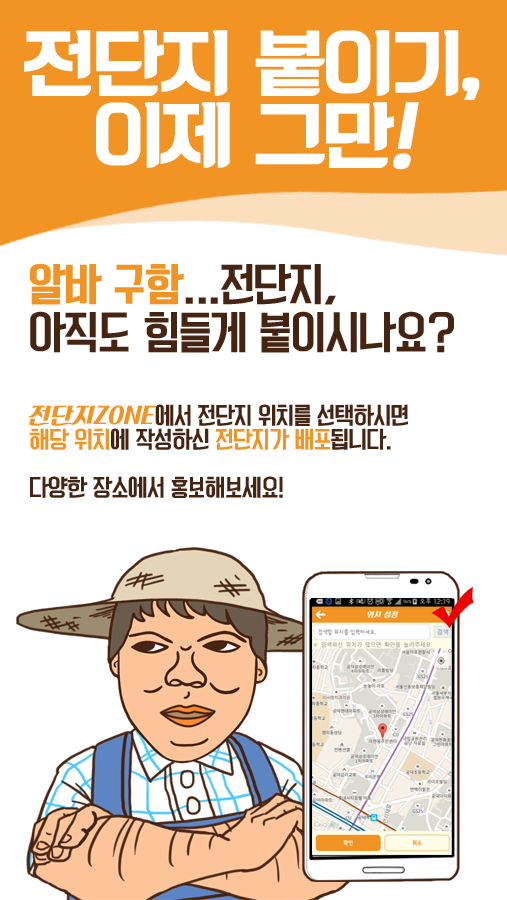
<style>
.page{position:relative;width:507px;height:900px;background:#ffffff}
.page>*{position:absolute;margin:0}
.t1{font:72px/72px "KoreanBLACK-B";letter-spacing:-0.05em;color:#ffffff}
.t2{font:72px/72px "KoreanBLACK-B";letter-spacing:-0.05em;color:#ffffff;font-style:italic}
.t3{font:42px/48px "KoreanYNMYT-M";letter-spacing:-0.05em;color:#462412}
.t4{font:42px/48px "KoreanYNMYT-B";letter-spacing:-0.05em;color:#f29423}
.t5{font:22px/24px "KoreanYNMYT-M";letter-spacing:-0.05em;color:#462412}
.t6{font:22px/24px "KoreanPDSR-R";color:#f29423}
.t7{font:22px/24px "KoreanYNMYT-M";letter-spacing:-0.05em;color:#f29423}
</style>
<div class="page">
<p class="t1" style="left:24px;top:30px;width:456px;height:140px;text-align:center">전단지 붙이기,<br>이제 그만<span class="t2">!</span></p>
<p class="t3" style="left:30px;top:263px;width:424px;height:90px"><span class="t4">알바 구함</span>...전단지,<br>아직도 힘들게 붙이시나요?</p>
<p class="t5" style="left:28px;top:404px;width:380px;height:94px"><span class="t6">전단지ZONE</span>에서 전단지 위치를 선택하시면<br><span class="t7">해당 위치</span>에 작성하신 <span class="t7">전단지가 배포</span>됩니다.<br><br>다양한 장소에서 홍보해보세요!</p>
</div>
